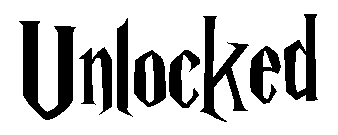
<style>
.page{position:relative;width:338px;height:135px;background:#ffffff}
.page>*{position:absolute;margin:0}
.t1{font:141px "HarryP";color:#000000;scale:0.86 1}
</style>
<div class="page">
<p class="t1" style="left:19px;top:14px;width:299px;height:108px">Unlocked</p>
</div>
